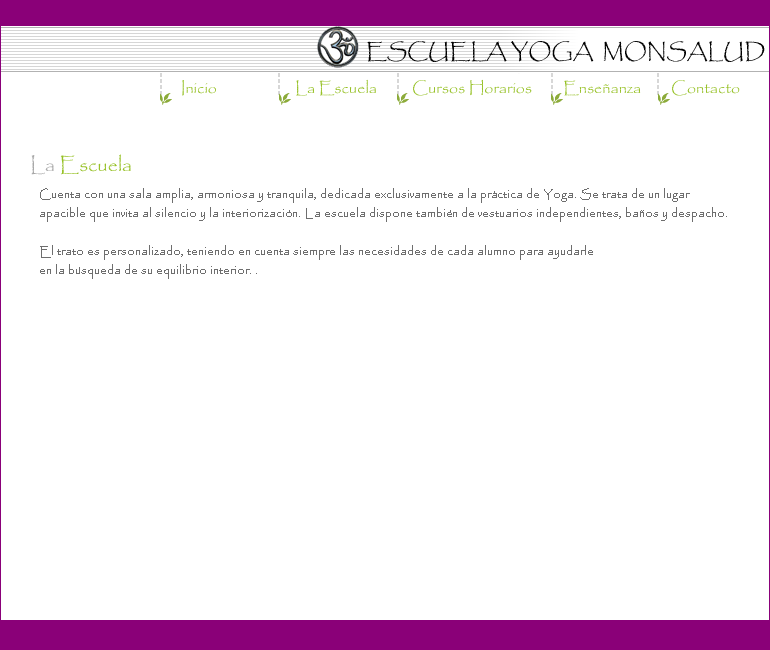
<style>
.page{position:relative;width:770px;height:650px;background:#ffffff}
.page>*{position:absolute;margin:0}
.t1{font:21px "Papyrus-Regular";color:#000000;text-transform:uppercase}
.t2{font:16px "Papyrus-Regular"}
.t3{font:16px "Papyrus-Regular";color:#97c127}
.t4{font:20px "Papyrus-Regular";color:#97c127}
.t5{font:20px "Papyrus-Regular";color:#a8a8a8}
.t6{font:12px/19px "Papyrus-Regular";color:#6e6e6e}
</style>
<div class="page">
<p class="t1" style="left:367px;top:41px;width:398px;height:21px">ESCUELA Yoga  MoNsalud</p>
<p class="t2" style="left:182px;top:80px;width:34px;height:16px">Inicio</p>
<p class="t3" style="left:296px;top:79px;width:80px;height:17px">La Escuela</p>
<p class="t3" style="left:413px;top:79px;width:119px;height:17px">Cursos Horarios</p>
<p class="t3" style="left:564px;top:80px;width:77px;height:16px">Enseñanza</p>
<p class="t3" style="left:672px;top:80px;width:68px;height:16px">Contacto</p>
<p class="t4" style="left:31px;top:154px;width:100px;height:21px"><span class="t5">La</span> Escuela</p>
<p class="t6" style="left:40px;top:188px;width:687px;height:91px">Cuenta con una sala amplia, armoniosa y tranquila, dedicada exclusivamente a la práctica de Yoga. Se trata de un lugar <br>apacible que invita al silencio y la interiorización. La escuela dispone también de vestuarios independientes, baños y despacho.<br><br>El trato es personalizado, teniendo en cuenta siempre las necesidades de cada alumno para ayudarle <br>en la búsqueda de su equilibrio interior. .</p>
</div>
